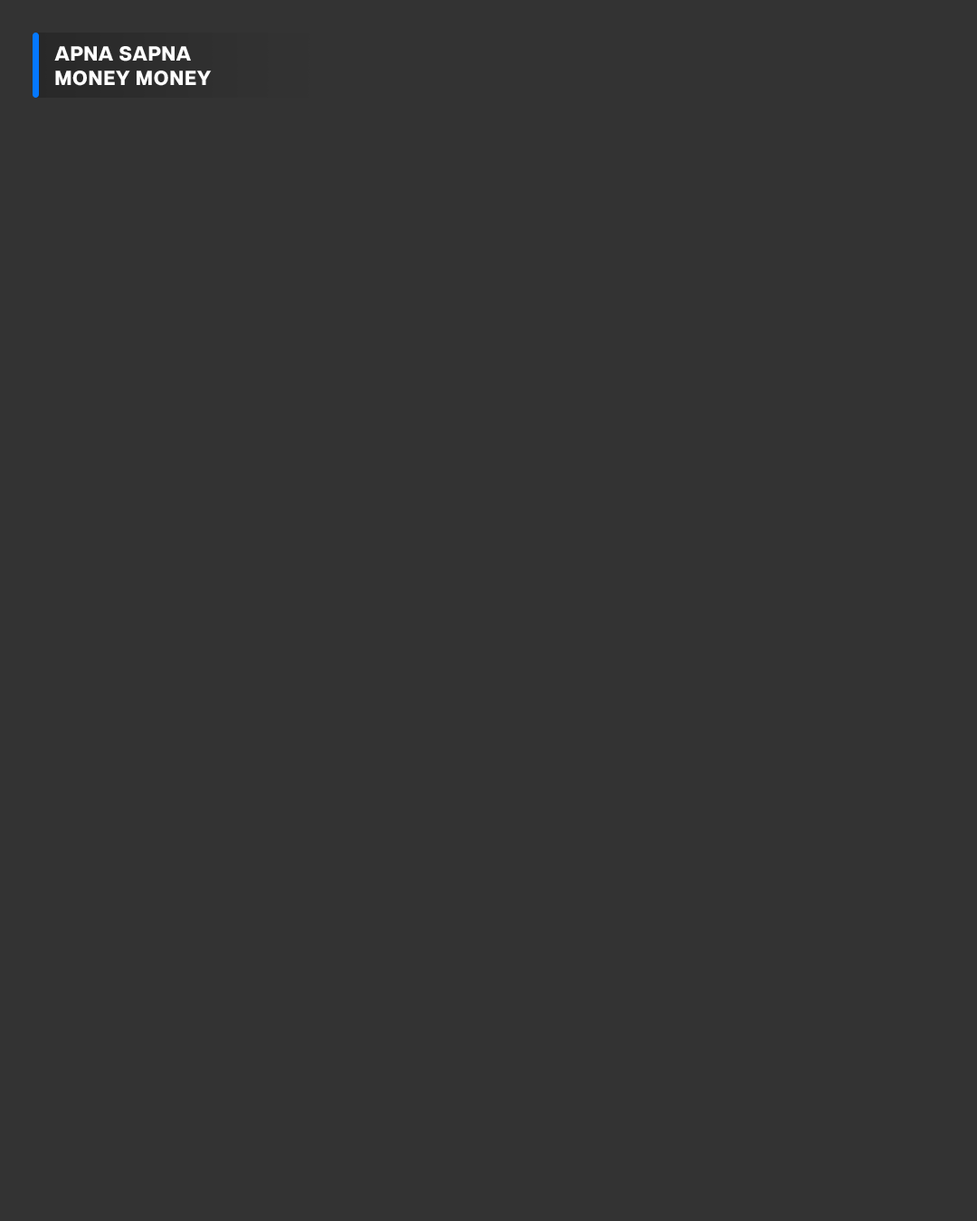
<style>
.page{position:relative;width:977px;height:1221px;background:#333333}
.page>*{position:absolute;margin:0}
.t1{font:20.3px "ArticulatCF-ExtraBold";letter-spacing:0.01em;color:#ffffff;text-transform:uppercase}
</style>
<div class="page">
<p class="t1" style="left:54px;top:46px;width:158px;height:40px">Apna Sapna <br>Money Money</p>
</div>
